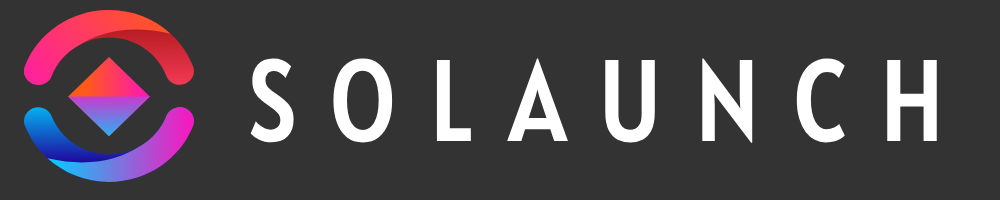
<style>
.page{position:relative;width:1000px;height:200px;background:#333333}
.page>*{position:absolute;margin:0}
.t1{font:116.2px "Alatsi-Regular";letter-spacing:0.32em;color:#ffffff;scale:0.87 1}
</style>
<div class="page">
<p class="t1" style="left:250px;top:58px;width:687px;height:85px">SOLAUNCH</p>
</div>
